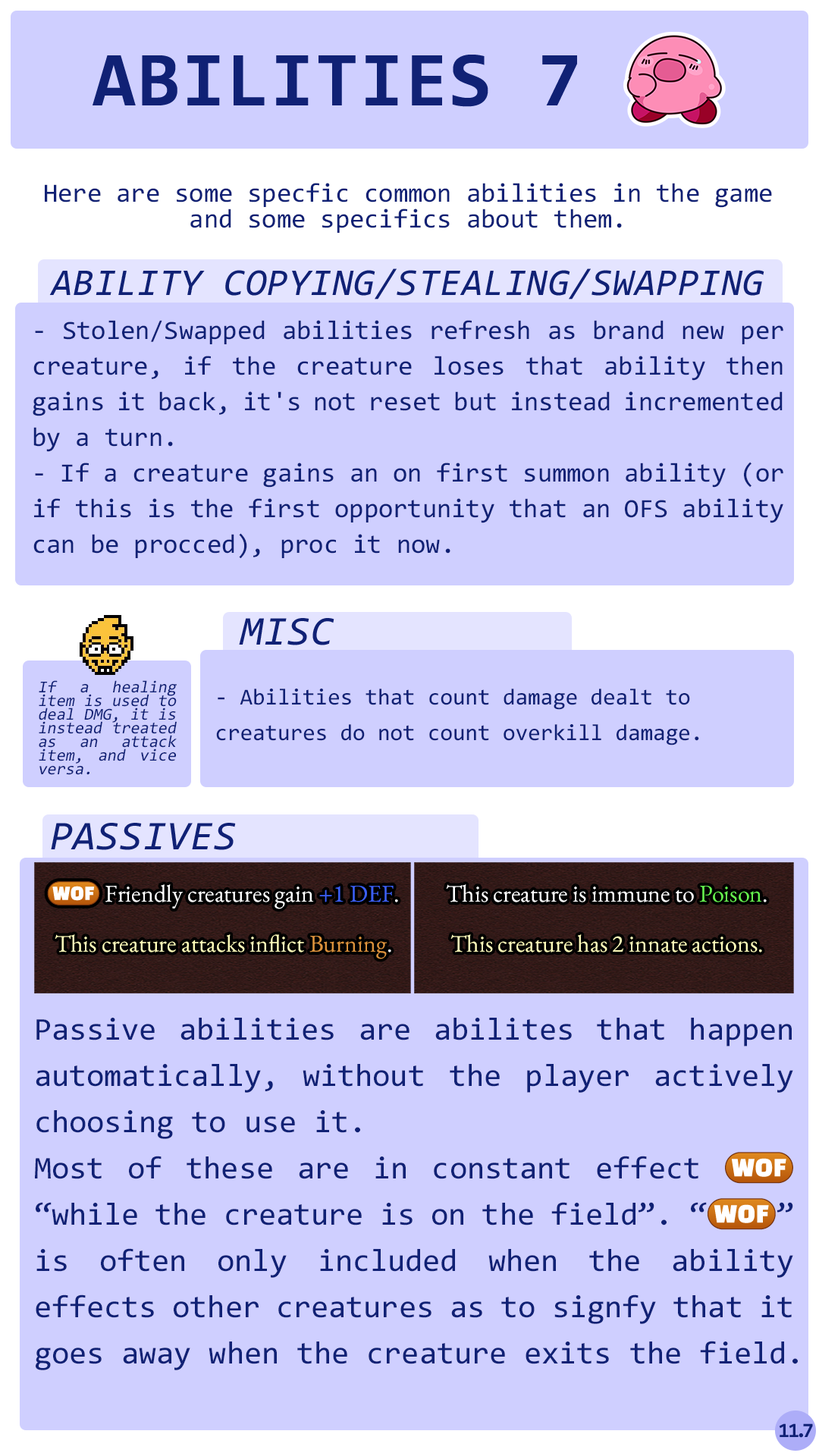
<style>
.page{position:relative;width:819px;height:1456px;background:#cfcfff}
.page>*{position:absolute;margin:0}
.t1{font:78.3px "Consolas-Bold";letter-spacing:0.02em;color:#102175}
.t2{font:26.5px/25.8px "Consolas";color:#102175}
.t3{font:37.9px "Consolas-Italic";letter-spacing:0.02em;color:#102175;text-transform:uppercase}
.t4{font:26.5px/35.6px "Consolas";color:#102175}
.t5{font:41.1px "Consolas-Italic";letter-spacing:0.02em;color:#102175}
.t6{font:16.7px/13.6px "Consolas";color:#102175;font-style:italic}
.t7{font:22.7px/35.6px "Consolas";color:#102175}
.t8{font:24.3px/50px "EBGaramond-Regular";color:#fffdba}
.t9{font:24.3px/50px "stoogedings-Regular";color:#ffffff}
.t10{font:24.3px/50px "EBGaramond-Regular";color:#ffffff}
.t11{font:24.3px/50px "EBGaramond-Regular";color:#3c5ff4}
.t12{font:24.3px/50px "EBGaramond-Regular";color:#db923d}
.t13{font:24.3px/50px "EBGaramond-Regular";color:#66f24f}
.t14{font:31.8px/46.3px "Consolas";color:#102175}
.t15{font:31.8px/46.3px "stoogedings-Regular";color:#102175}
.t16{font:20.5px "Consolas-Bold";letter-spacing:-0.06em;color:#102175}
.t17{font:20.5px "Consolas-Bold";letter-spacing:-0.2em;color:#102175}
.t18{font:20.5px "Consolas-Bold";letter-spacing:-0.22em;color:#102175}
</style>
<div class="page">
<p class="t1" style="left:93px;top:55px;width:484px;height:52px">ABILITIES 7</p>
<p class="t2" style="left:45px;top:183px;width:727px;height:50px;text-align:center">Here are some specfic common abilities in the game and some specifics about them.</p>
<p class="t3" style="left:49px;top:268px;width:715px;height:32px">Ability Copying/Stealing/Swapping</p>
<p class="t4" style="left:33px;top:320px;width:750px;height:239px;text-align:justify">- Stolen/Swapped abilities refresh as brand new per creature, if the creature loses that ability then gains it back, it's not reset but instead incremented by a turn.<br>- If a creature gains an on first summon ability (or if this is the first opportunity that an OFS ability can be procced), proc it now.</p>
<p class="t5" style="left:239px;top:618px;width:95px;height:27px">MISC</p>
<p class="t6" style="left:39px;top:680px;width:138px;height:95px;text-align:justify">If a healing item is used to deal DMG, it is instead treated as an attack item, and vice versa.</p>
<p class="t7" style="left:216px;top:689px;width:483px;height:56px">- Abilities that count damage dealt to creatures do not count overkill damage.</p>
<p class="t5" style="left:51px;top:823px;width:185px;height:27px">PASSIVES</p>
<p class="t8" style="left:47px;top:881px;width:351px;height:78px;text-align:center"><span class="t9">(WOF)</span><span class="t10"> Friendly creatures gain </span><span class="t11">+1 DEF</span><span class="t10">.<br></span>This creature attacks inflict <span class="t12">Burning</span><span class="t10">.</span></p>
<p class="t8" style="left:446px;top:884px;width:321px;height:68px;text-align:center"><span class="t10">This creature is immune to </span><span class="t13">Poison</span><span class="t10">.<br></span>This creature has 2 innate actions.</p>
<p class="t14" style="left:35px;top:1018px;width:763px;height:352px;text-align:justify">Passive abilities are abilites that happen automatically, without the player actively choosing to use it.<br>Most of these are in constant effect <span class="t15">(WOF)</span> “while the creature is on the field”. “<span class="t15">(WOF)</span>” is often only included when the ability effects other creatures as to signfy that it goes away when the creature exits the field.</p>
<p class="t16" style="left:779px;top:1423px;width:34px;height:15px">1<span class="t17">1</span><span class="t18">.</span>7</p>
</div>
